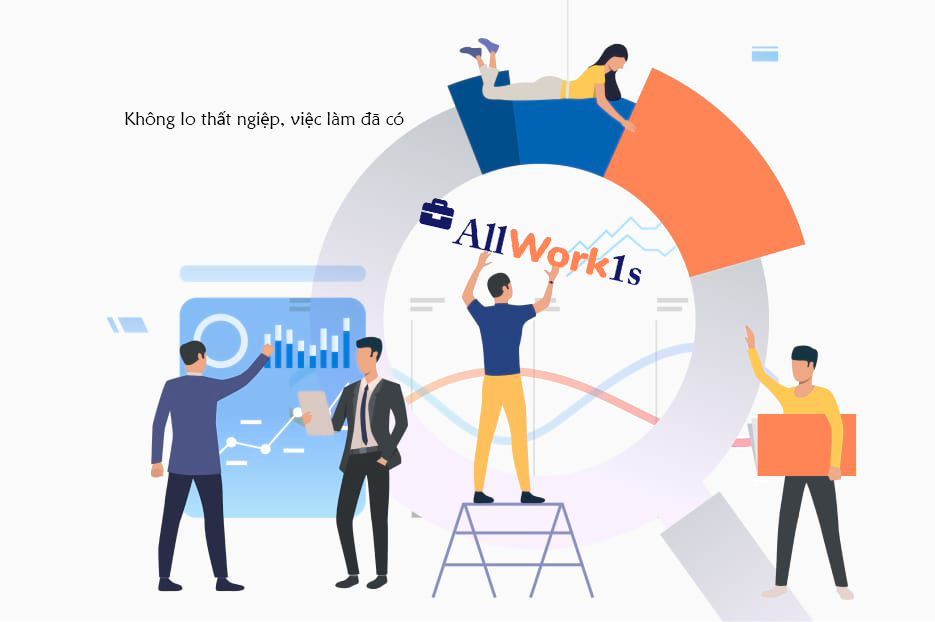
<style>
.page{position:relative;width:935px;height:622px;background:#fafafa}
.page>*{position:absolute;margin:0}
.t1{font:18px "MaiandraGD-Regular";color:#000000}
.t2{font:18px "MyriadPro-Regular";color:#000000}
</style>
<div class="page">
<p class="t1" style="left:125px;top:111px;width:279px;height:18px">Không lo th<span class="t2">ấ</span>t ngi<span class="t2">ệ</span>p, vi<span class="t2">ệ</span>c làm đã có</p>
</div>
